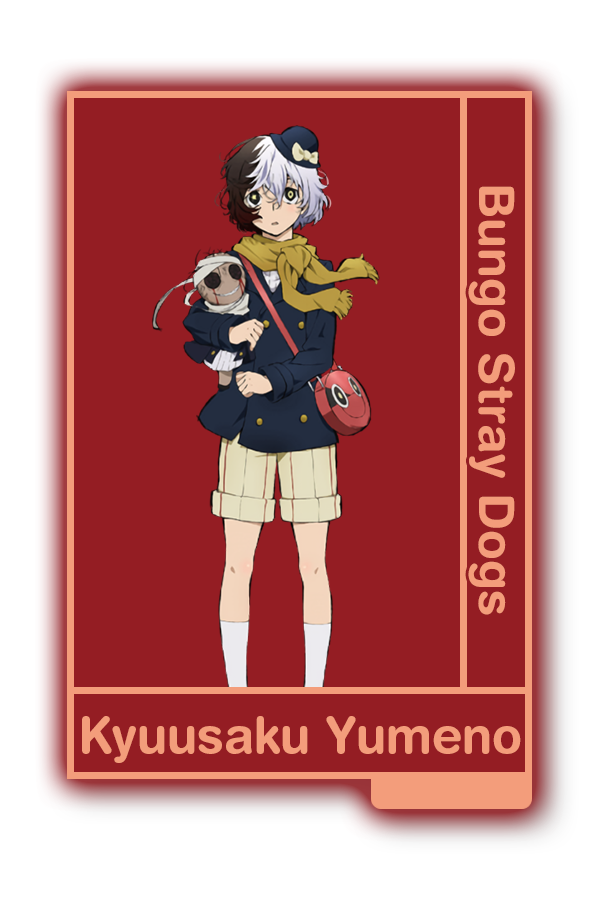
<style>
.page{position:relative;width:600px;height:900px;background:#941d23}
.page>*{position:absolute;margin:0}
.t1{font:48.8px "HelveticaRounded-Bold";color:#f39d7b}
.t2{font:49.4px "HelveticaRounded-Bold";color:#f39d7b}
</style>
<div class="page">
<p class="t1" style="left:468px;top:186px;width:47px;height:429px;rotate:90deg">Bungo Stray Dogs</p>
<p class="t2" style="left:82px;top:716px;width:439px;height:47px">Kyuusaku Yumeno</p>
</div>
